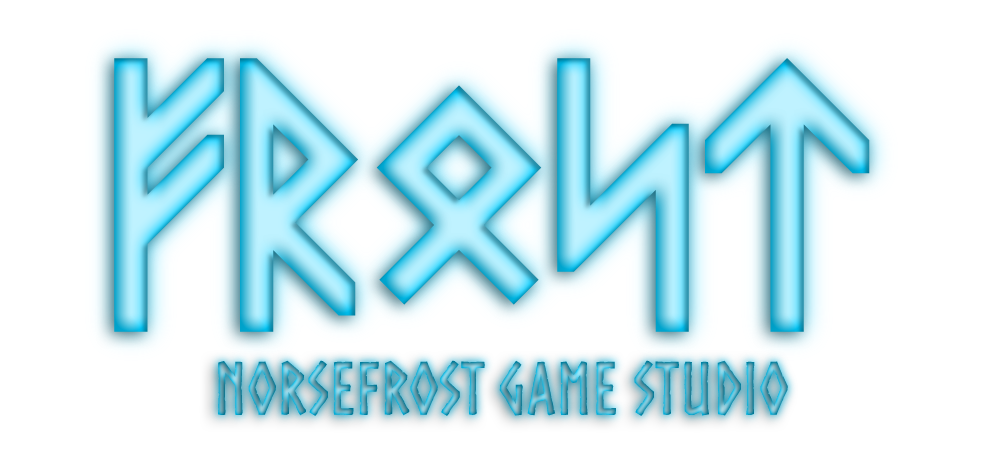
<style>
.page{position:relative;width:1000px;height:455px;background:#ffffff}
.page>*{position:absolute;margin:0}
.t1{font:72px "Norse-Bold"}
</style>
<div class="page">
<p class="t1" style="left:218px;top:360px;width:570px;height:56px">NORSEFROST GAME STUDIO</p>
</div>
